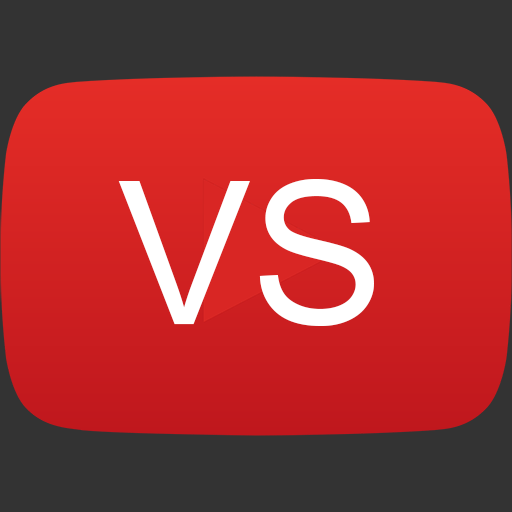
<style>
.page{position:relative;width:512px;height:512px;background:#333333}
.page>*{position:absolute;margin:0}
.t1{font:199.8px "ArialMT";color:#ffffff}
</style>
<div class="page">
<p class="t1" style="left:118px;top:179px;width:256px;height:147px">VS</p>
</div>
